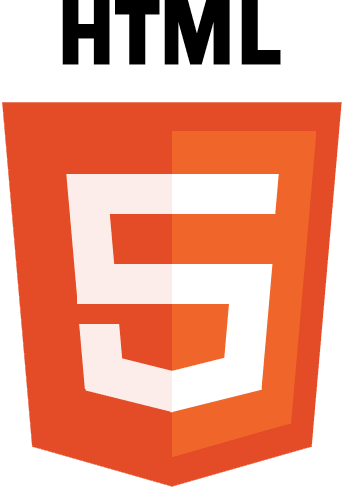
<style>
.page{position:relative;width:344px;height:487px;background:#ffffff}
.page>*{position:absolute;margin:0}
.t1{font:94.7px "FranklinGothic-Demi";color:#000000;font-weight:bold;scale:0.91 1}
</style>
<div class="page">
<p class="t1" style="left:62px;top:0px;width:219px;height:65px">HTML</p>
</div>
